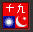
<style>
.page{position:relative;width:33px;height:32px;background:#f20000}
.page>*{position:absolute;margin:0}
.t1{font:10.4px "SimSun";color:#ffffff}
</style>
<div class="page">
<p class="t1" style="left:6px;top:4px;width:19px;height:9px">十九</p>
</div>
